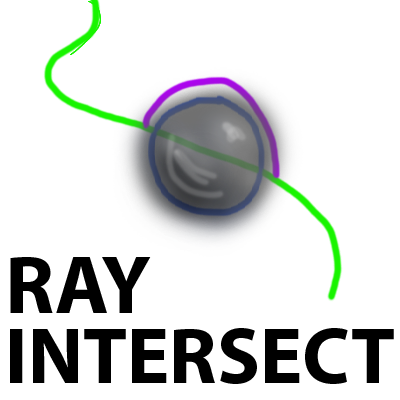
<style>
.page{position:relative;width:400px;height:400px;background:#ffffff}
.page>*{position:absolute;margin:0}
.t1{font:82.4px "MyriadPro-Bold";color:#000000}
.t2{font:79.8px "MyriadPro-Bold";color:#000000}
</style>
<div class="page">
<p class="t1" style="left:10px;top:257px;width:141px;height:56px">RAY</p>
<p class="t2" style="left:10px;top:328px;width:384px;height:56px">INTERSECT</p>
</div>
